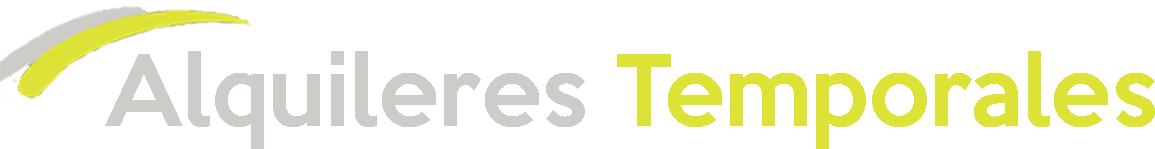
<style>
.page{position:relative;width:1155px;height:149px;background:#ffffff}
.page>*{position:absolute;margin:0}
.t1{font:90px "KeepCalm-Medium";color:#cdccc8}
.t2{font:90px "KeepCalm-Medium";color:#dde236}
</style>
<div class="page">
<p class="t1" style="left:105px;top:51px;width:1050px;height:98px">Alquileres <span class="t2">Temporales</span></p>
</div>
